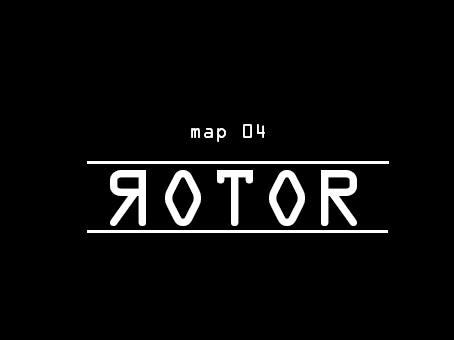
<style>
.page{position:relative;width:454px;height:340px;background:#000000}
.page>*{position:absolute;margin:0}
.t1{font:18px "OCRAStd";color:#ffffff}
.t2{font:12px "OCRAStd";color:#ffffff}
.t3{font:72px "OCRAStd";color:#ffffff}
</style>
<div class="page">
<p class="t1" style="left:191px;top:124px;width:74px;height:18px"><span class="t2"><br><br><br><br><br><br><br></span>map 04</p>
<p class="t3" style="left:110px;top:170px;width:36px;height:56px;rotate:180deg">R</p>
<p class="t3" style="left:165px;top:170px;width:192px;height:56px">OTOR</p>
</div>
